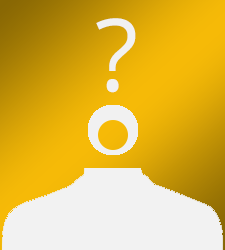
<style>
.page{position:relative;width:225px;height:250px;background:#f2f2f2}
.page>*{position:absolute;margin:0}
.t1{font:100px "OpenSans";color:#f1f1f1}
</style>
<div class="page">
<p class="t1" style="left:96px;top:18px;width:40px;height:75px">?</p>
</div>
